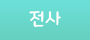
<style>
.page{position:relative;width:90px;height:40px}
.page>*{position:absolute;margin:0}
.t1{font:17.8px "MaplestoryLight";color:#ffffff}
</style>
<div class="page">
<p class="t1" style="left:29px;top:11px;width:32px;height:16px">전사</p>
</div>
